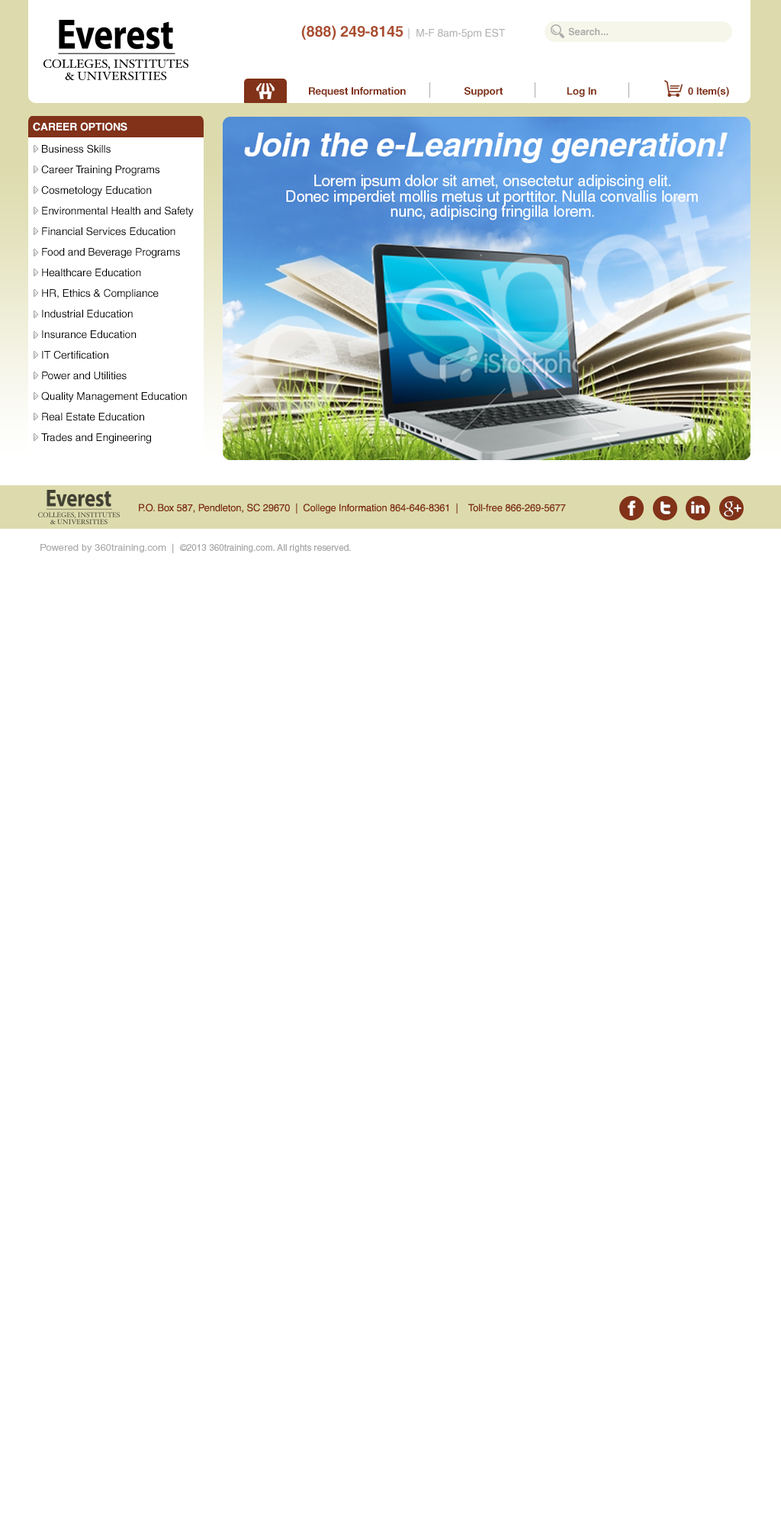
<style>
.page{position:relative;width:781px;height:1526px;background:#ffffff}
.page>*{position:absolute;margin:0}
.t1{font:10.7px "Helvetica";letter-spacing:-0.01em;color:#adabab}
.t2{font:15.3px "Helvetica-Bold";letter-spacing:-0.01em;color:#aa4d2e}
.t3{font:9.9px "Helvetica-Bold";letter-spacing:-0.01em;color:#adabab}
.t4{font:10.3px "Helvetica-Bold";letter-spacing:-0.01em;color:#813218}
.t5{font:10.7px "Helvetica-Bold";letter-spacing:-0.01em;color:#ffffff}
.t6{font:10.7px/20.6px "Helvetica";letter-spacing:-0.01em;color:#000000}
.t7{font:9.9px "Helvetica";letter-spacing:-0.01em;color:#813218}
.t8{font:9.2px "Helvetica";letter-spacing:-0.01em;color:#adabab}
.t9{font:9.2px "Helvetica";color:#adabab;scale:1.1 1}
</style>
<div class="page">
<p class="t1" style="left:301px;top:25px;width:205px;height:15px"><span class="t2">(888) 249-8145 </span>|  M-F 8am-5pm EST</p>
<p class="t3" style="left:568px;top:27px;width:40px;height:9px">Search...</p>
<p class="t4" style="left:309px;top:87px;width:420px;height:10px">Request Information                     Support                       Log In                                 0 Item(s)</p>
<p class="t5" style="left:33px;top:122px;width:94px;height:9px">CAREER OPTIONS</p>
<p class="t6" style="left:41px;top:144px;width:153px;height:300px">Business Skills <br>Career Training Programs <br>Cosmetology Education <br>Environmental Health and Safety <br>Financial Services Education <br>Food and Beverage Programs <br>Healthcare Education <br>HR, Ethics &amp; Compliance <br>Industrial Education <br>Insurance Education <br>IT Certification <br>Power and Utilities <br>Quality Management Education <br>Real Estate Education <br>Trades and Engineering</p>
<p class="t7" style="left:139px;top:503px;width:427px;height:11px">P.O. Box 587, Pendleton, SC 29670  |  College Information 864-646-8361  |    Toll-free 866-269-5677</p>
<p class="t8" style="left:40px;top:543px;width:311px;height:10px"><span class="t9">Powered by 360training.com  |  </span>©2013 360training.com. All rights reserved.</p>
</div>
